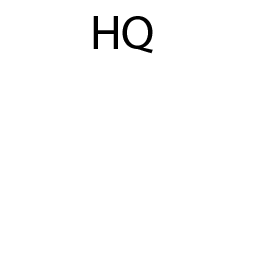
<style>
.page{position:relative;width:256px;height:256px;background:#ffffff}
.page>*{position:absolute;margin:0}
.t1{font:48px "MyriadPro-Regular";color:#000000}
</style>
<div class="page">
<p class="t1" style="left:93px;top:16px;width:60px;height:38px">HQ</p>
</div>
